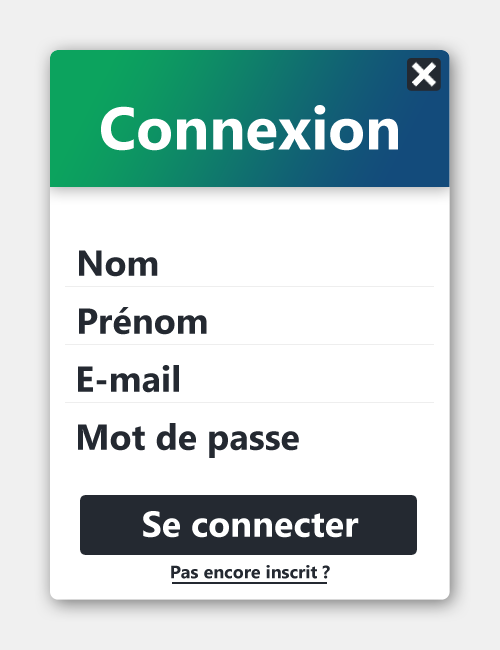
<style>
.page{position:relative;width:500px;height:650px;background:#ffffff}
.page>*{position:absolute;margin:0}
.t1{font:60px "SegoeUI-Bold";color:#ffffff}
.t2{font:36px "SegoeUI-Bold";color:#242931}
.t3{font:36px "SegoeUI-Bold";color:#ffffff}
.t4{font:18px "SegoeUI-Bold";color:#242931}
</style>
<div class="page">
<p class="t1" style="left:101px;top:105px;width:297px;height:46px">Connexion</p>
<p class="t2" style="left:79px;top:250px;width:79px;height:27px">Nom</p>
<p class="t2" style="left:79px;top:307px;width:128px;height:28px">Prénom</p>
<p class="t2" style="left:78px;top:365px;width:101px;height:28px">E-mail</p>
<p class="t2" style="left:78px;top:423px;width:221px;height:35px">Mot de passe</p>
<p class="t3" style="left:143px;top:511px;width:216px;height:27px">Se connecter</p>
<p class="t4" style="left:171px;top:565px;width:159px;height:14px">Pas encore inscrit ?</p>
</div>
